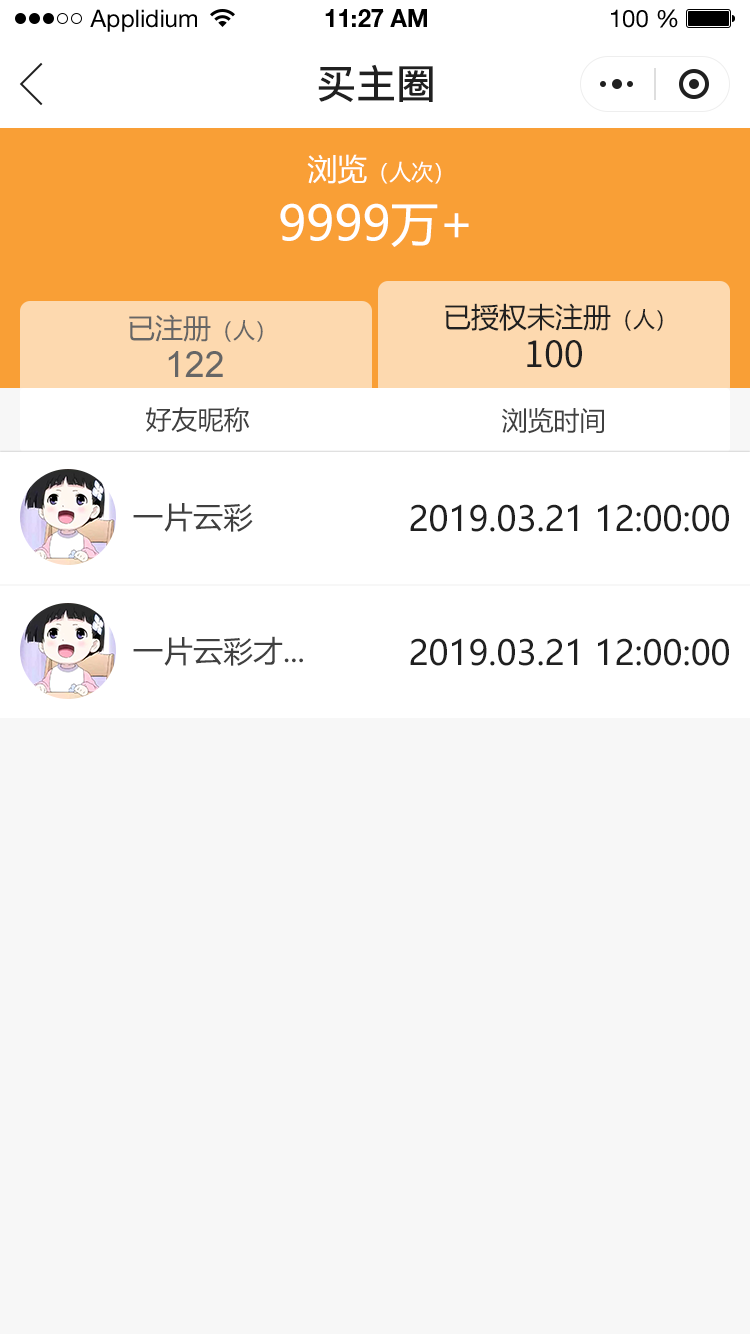
<style>
.page{position:relative;width:750px;height:1334px;background:#f7f7f7}
.page>*{position:absolute;margin:0}
.t1{font:24px "HelveticaNeueLTStd-Roman";color:#000000}
.t2{font:24px "HelveticaNeueLTStd-Bd";color:#000000}
.t3{font:40px "PingFang-SC-Bold";color:#202020;text-transform:uppercase}
.t4{font:22px "MicrosoftYaHei";color:#ffffff;text-transform:uppercase}
.t5{font:30px "MicrosoftYaHei";color:#ffffff;text-transform:uppercase}
.t6{font:48px "MicrosoftYaHei";color:#ffffff;text-transform:uppercase}
.t7{font:28.1px "MicrosoftYaHei";color:#202020;text-transform:uppercase}
.t8{font:22.1px "MicrosoftYaHei";color:#202020;text-transform:uppercase}
.t9{font:28px "MicrosoftYaHei";color:#666666;text-transform:uppercase}
.t10{font:22px "MicrosoftYaHei";color:#666666;text-transform:uppercase}
.t11{font:36.1px "SourceHanSansCN-Regular";color:#202020;text-transform:uppercase}
.t12{font:36.1px "ArialMT";color:#666666;text-transform:uppercase}
.t13{font:26px "MicrosoftYaHei";color:#404040;text-transform:uppercase}
.t14{font:30px "MicrosoftYaHei";color:#404040;text-transform:uppercase}
.t15{font:34px "MicrosoftYaHei";color:#202020;text-transform:uppercase}
</style>
<div class="page">
<p class="t1" style="left:90px;top:9px;width:107px;height:23px">Applidium</p>
<p class="t2" style="left:325px;top:9px;width:102px;height:18px">11:27 AM</p>
<p class="t1" style="left:611px;top:9px;width:67px;height:19px">100 %</p>
<p class="t3" style="left:318px;top:64px;width:115px;height:38px">买主圈</p>
<p class="t4" style="left:307px;top:154px;width:134px;height:30px"><span class="t5">浏览</span>（人次）</p>
<p class="t6" style="left:280px;top:203px;width:189px;height:44px">9999万+</p>
<p class="t7" style="left:445px;top:303px;width:218px;height:28px">已授权未注册<span class="t8">（人）</span></p>
<p class="t9" style="left:129px;top:314px;width:134px;height:28px">已注册<span class="t10">（人）</span></p>
<p class="t11" style="left:527px;top:340px;width:55px;height:28px">100</p>
<p class="t12" style="left:168px;top:351px;width:55px;height:26px">122</p>
<p class="t13" style="left:146px;top:407px;width:104px;height:26px">好友昵称</p>
<p class="t13" style="left:502px;top:408px;width:102px;height:26px">浏览时间</p>
<p class="t14" style="left:133px;top:503px;width:120px;height:29px">一片云彩</p>
<p class="t15" style="left:410px;top:504px;width:319px;height:28px">2019.03.21 12:00:00</p>
<p class="t14" style="left:133px;top:636px;width:170px;height:30px">一片云彩才...</p>
<p class="t15" style="left:410px;top:638px;width:319px;height:28px">2019.03.21 12:00:00</p>
</div>
